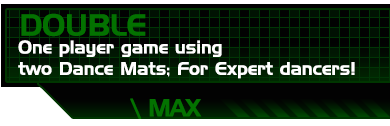
<style>
.page{position:relative;width:390px;height:126px;background:#020202}
.page>*{position:absolute;margin:0}
.t1{font:29.6px "HandelGothicBT-Regular";color:#037200}
.t2{font:17.8px "HandelGothicBT-Regular";color:#ffffff}
.t3{font:23.7px "HandelGothicBT-Regular";letter-spacing:-0.05em;color:#037200}
.t4{font:23.7px "HandelGothicBT-Regular";letter-spacing:-0.05em;color:#037200;font-weight:bold}
</style>
<div class="page">
<p class="t1" style="left:21px;top:13px;width:125px;height:24px">DOUBLE</p>
<p class="t2" style="left:18px;top:40px;width:337px;height:39px">One player game using<br>two Dance Mats; For Expert dancers!</p>
<p class="t3" style="left:130px;top:98px;width:72px;height:21px"><span class="t4">\</span> MAX</p>
</div>
